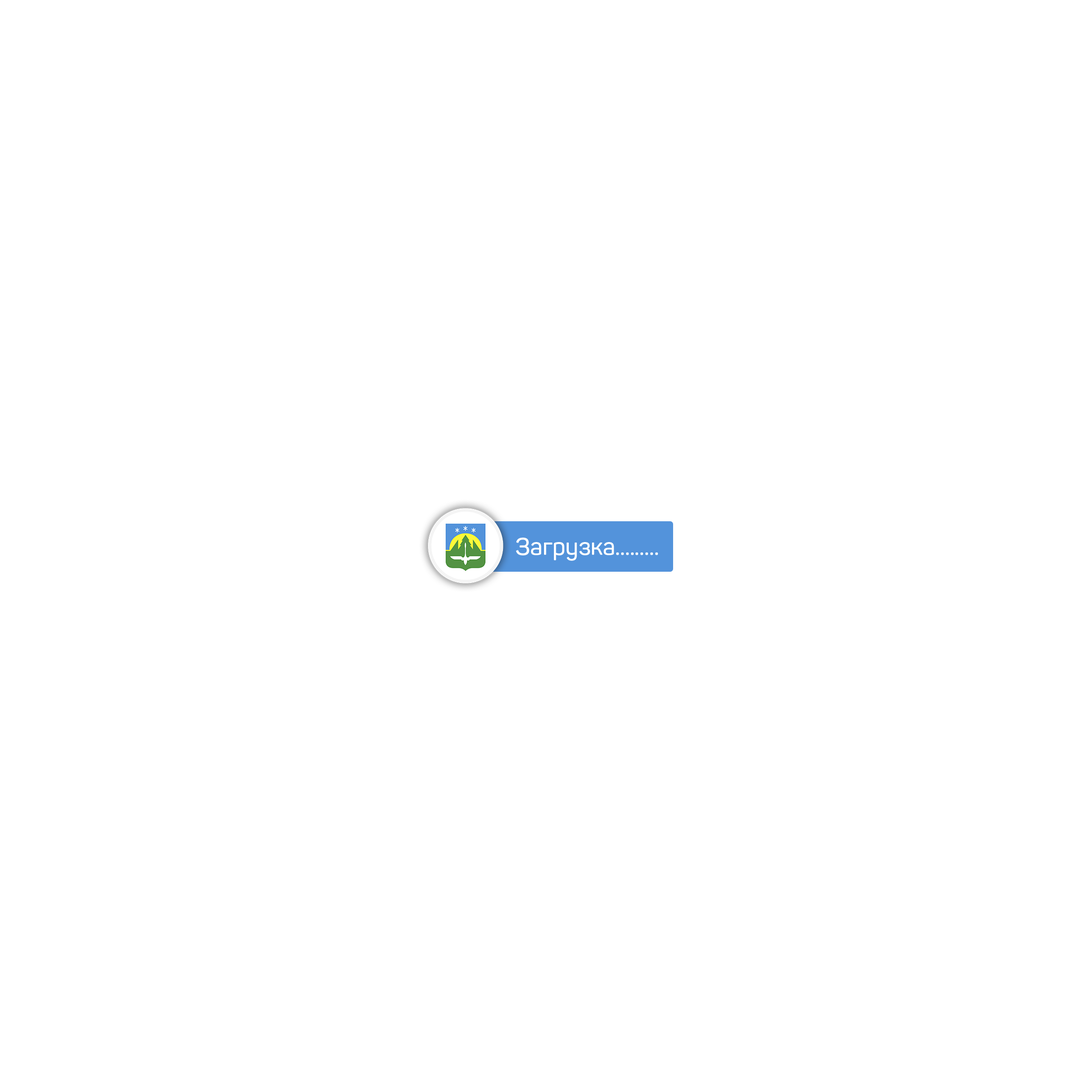
<style>
.page{position:relative;width:1092px;height:1092px;background:#ffffff}
.page>*{position:absolute;margin:0}
.t1{font:23.7px "Panton-SemiBold";color:#ffffff}
</style>
<div class="page">
<p class="t1" style="left:516px;top:538px;width:142px;height:23px">Загрузка.........</p>
</div>
